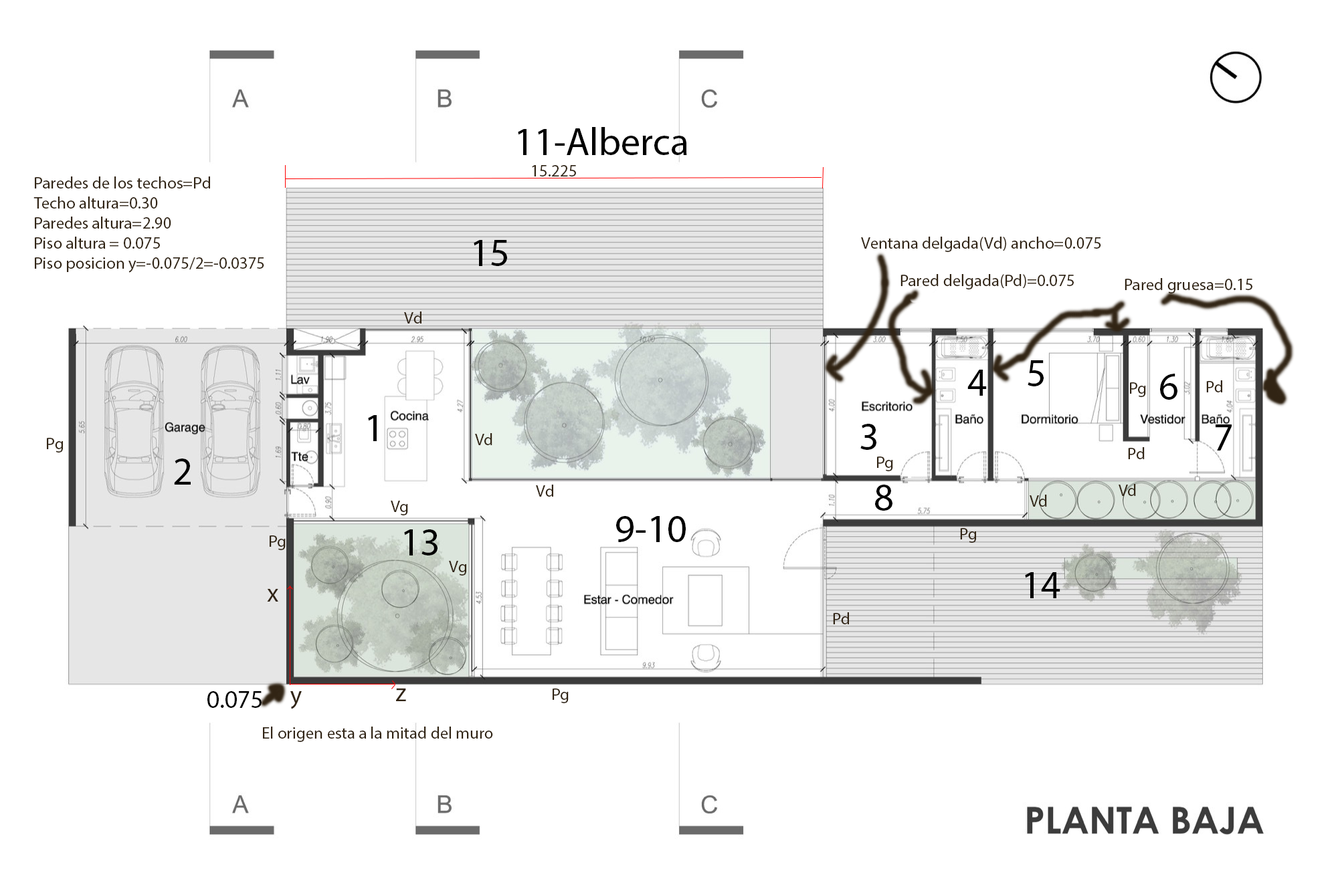
<style>
.page{position:relative;width:1338px;height:891px;background:#ffffff}
.page>*{position:absolute;margin:0}
.t1{font:39px "MyriadPro-Regular";color:#000000}
.t2{font:16.7px "MyriadPro-Regular";color:#312414}
.t3{font:25.1px "MyriadPro-Regular";color:#312414}
.t4{font:25.1px "MyriadPro-Regular";color:#000000}
</style>
<div class="page">
<p class="t1" style="left:518px;top:127px;width:169px;height:28px">11-Alberca</p>
<p class="t2" style="left:532px;top:165px;width:44px;height:12px">15.225</p>
<p class="t2" style="left:33px;top:177px;width:231px;height:96px">Paredes de los techos=Pd<br>Techo altura=0.30<br>Paredes altura=2.90<br>Piso altura = 0.075<br>Piso posicion y=-0.075/2=-0.0375</p>
<p class="t1" style="left:474px;top:240px;width:33px;height:26px">15</p>
<p class="t2" style="left:861px;top:237px;width:240px;height:15px">Ventana delgada(Vd) ancho=0.075</p>
<p class="t2" style="left:900px;top:274px;width:173px;height:16px">Pared delgada(Pd)=0.075</p>
<p class="t2" style="left:1124px;top:278px;width:128px;height:16px">Pared gruesa=0.15</p>
<p class="t2" style="left:404px;top:312px;width:17px;height:12px">Vd</p>
<p class="t1" style="left:1027px;top:360px;width:16px;height:27px">5</p>
<p class="t1" style="left:967px;top:370px;width:19px;height:26px">4</p>
<p class="t1" style="left:1160px;top:374px;width:17px;height:26px">6</p>
<p class="t2" style="left:1130px;top:383px;width:16px;height:14px">Pg</p>
<p class="t2" style="left:1206px;top:381px;width:16px;height:12px">Pd</p>
<p class="t1" style="left:368px;top:415px;width:9px;height:26px">1</p>
<p class="t1" style="left:860px;top:424px;width:16px;height:26px">3</p>
<p class="t1" style="left:1215px;top:425px;width:16px;height:26px">7</p>
<p class="t2" style="left:475px;top:433px;width:17px;height:12px">Vd</p>
<p class="t2" style="left:47px;top:438px;width:16px;height:15px">Pg</p>
<p class="t2" style="left:1128px;top:447px;width:16px;height:12px">Pd</p>
<p class="t1" style="left:174px;top:459px;width:17px;height:26px">2</p>
<p class="t2" style="left:877px;top:457px;width:16px;height:14px">Pg</p>
<p class="t2" style="left:536px;top:485px;width:17px;height:12px">Vd</p>
<p class="t1" style="left:875px;top:485px;width:17px;height:26px">8</p>
<p class="t2" style="left:1118px;top:484px;width:18px;height:12px">Vd</p>
<p class="t2" style="left:1029px;top:495px;width:18px;height:12px">Vd</p>
<p class="t2" style="left:391px;top:501px;width:17px;height:15px">Vg</p>
<p class="t1" style="left:616px;top:516px;width:70px;height:26px">9-10</p>
<p class="t1" style="left:404px;top:530px;width:33px;height:26px">13</p>
<p class="t2" style="left:960px;top:528px;width:16px;height:15px">Pg</p>
<p class="t2" style="left:270px;top:536px;width:16px;height:14px">Pg</p>
<p class="t2" style="left:449px;top:561px;width:17px;height:15px">Vg</p>
<p class="t1" style="left:1025px;top:572px;width:35px;height:27px">14</p>
<p class="t3" style="left:267px;top:589px;width:11px;height:13px">x</p>
<p class="t2" style="left:833px;top:613px;width:16px;height:12px">Pd</p>
<p class="t3" style="left:396px;top:689px;width:10px;height:13px">z</p>
<p class="t2" style="left:552px;top:689px;width:16px;height:15px">Pg</p>
<p class="t4" style="left:207px;top:692px;width:54px;height:16px">0.075</p>
<p class="t3" style="left:290px;top:692px;width:12px;height:18px">y</p>
<p class="t2" style="left:263px;top:727px;width:230px;height:15px">El origen esta a la mitad del muro</p>
</div>
